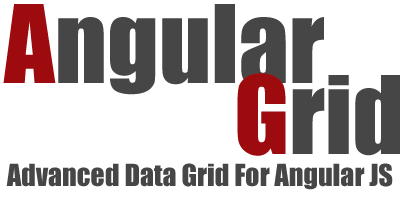
<style>
.page{position:relative;width:400px;height:200px;background:#ffffff}
.page>*{position:absolute;margin:0}
.t1{font:100px "Impact";color:#464646}
.t2{font:100px "Impact";color:#9e0b0f}
.t3{font:28px "Impact";color:#464646}
</style>
<div class="page">
<p class="t1" style="left:3px;top:4px;width:321px;height:91px"><span class="t2">A</span>ngular</p>
<p class="t1" style="left:237px;top:73px;width:164px;height:83px"><span class="t2">G</span>rid</p>
<p class="t3" style="left:6px;top:163px;width:387px;height:27px">Advanced Data Grid For Angular JS</p>
</div>
